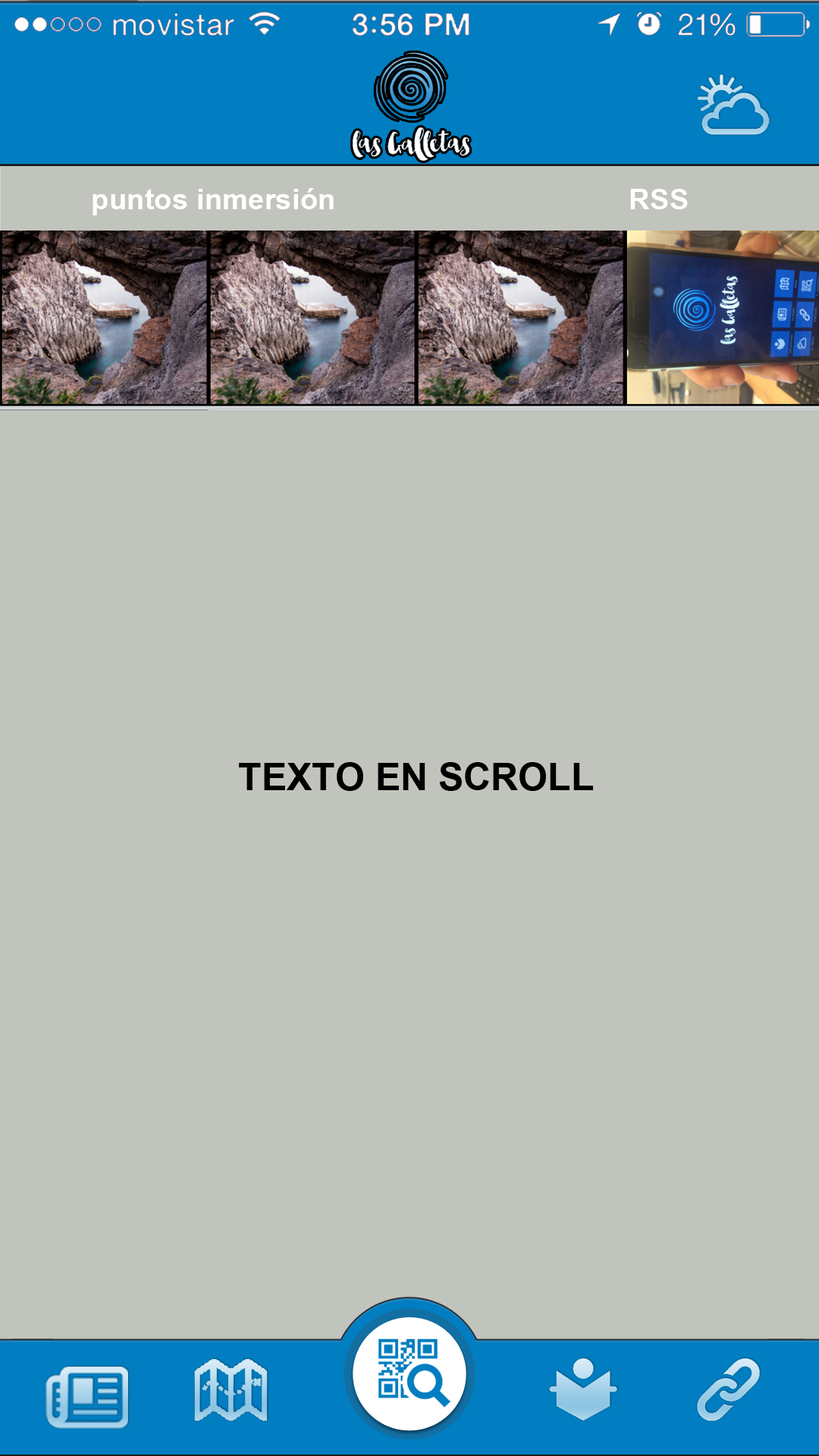
<style>
.page{position:relative;width:819px;height:1456px;background:#c1c4bc}
.page>*{position:absolute;margin:0}
.t1{font:29.1px "Arial-BoldMT";color:#ffffff}
.t2{font:37.9px "Arial-BoldMT";color:#000000}
</style>
<div class="page">
<p class="t1" style="left:93px;top:188px;width:241px;height:27px">puntos inmersión</p>
<p class="t1" style="left:630px;top:189px;width:58px;height:20px">RSS</p>
<p class="t2" style="left:239px;top:762px;width:354px;height:29px">TEXTO EN SCROLL</p>
</div>
